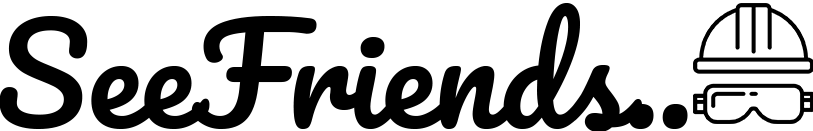
<style>
.page{position:relative;width:813px;height:131px;background:#ffffff}
.page>*{position:absolute;margin:0}
.t1{font:133.3px "Pacifico-Regular";color:#000000}
</style>
<div class="page">
<p class="t1" style="left:0px;top:3px;width:688px;height:129px">SeeFriends..</p>
</div>
